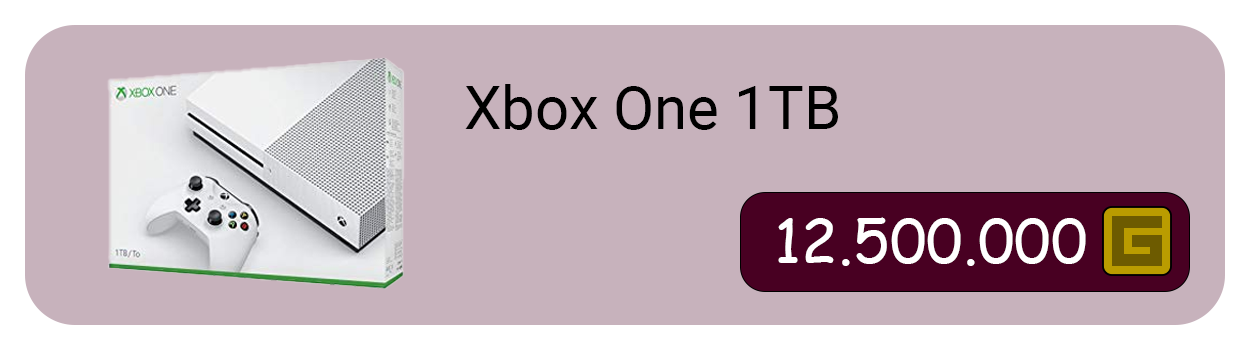
<style>
.page{position:relative;width:1250px;height:350px;background:#c7b2bc}
.page>*{position:absolute;margin:0}
.t1{font:60px "Roboto-Regular";color:#000000}
.t2{font:60px "ComicSansMS";color:#ffffff}
</style>
<div class="page">
<p class="t1" style="left:465px;top:84px;width:373px;height:46px">Xbox One 1TB</p>
<p class="t2" style="left:778px;top:217px;width:308px;height:49px">12.500.000</p>
</div>
